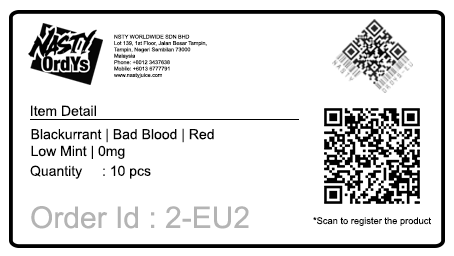
<style>
.page{position:relative;width:454px;height:256px;background:#ffffff}
.page>*{position:absolute;margin:0}
.t1{font:5.3px "ArialMT";color:#000000}
.t2{font:14px "ArialMT";color:#000000}
.t3{font:30px "ArialMT";color:#b4b4b4}
.t4{font:9.3px "ArialMT";color:#000000}
</style>
<div class="page">
<p class="t1" style="left:114px;top:34px;width:93px;height:45px">NSTY WORLDWIDE SDN BHD<br>Lot 139, 1st Floor, Jalan Besar Tampin,<br>Tampin, Negeri Sembilan 73000<br>Malaysia<br>Phone: +6012 3437638<br>Mobile: +6013 6777791<br>www.nastyjuice.com</p>
<p class="t2" style="left:31px;top:105px;width:65px;height:11px">Item Detail</p>
<p class="t2" style="left:31px;top:128px;width:183px;height:31px">Blackurrant | Bad Blood | Red<br>Low Mint | 0mg</p>
<p class="t2" style="left:30px;top:165px;width:121px;height:14px">Quantity  : 10 pcs</p>
<p class="t3" style="left:31px;top:206px;width:218px;height:23px">Order Id : 2-EU2</p>
<p class="t4" style="left:313px;top:217px;width:118px;height:9px">*Scan to register the product</p>
</div>
